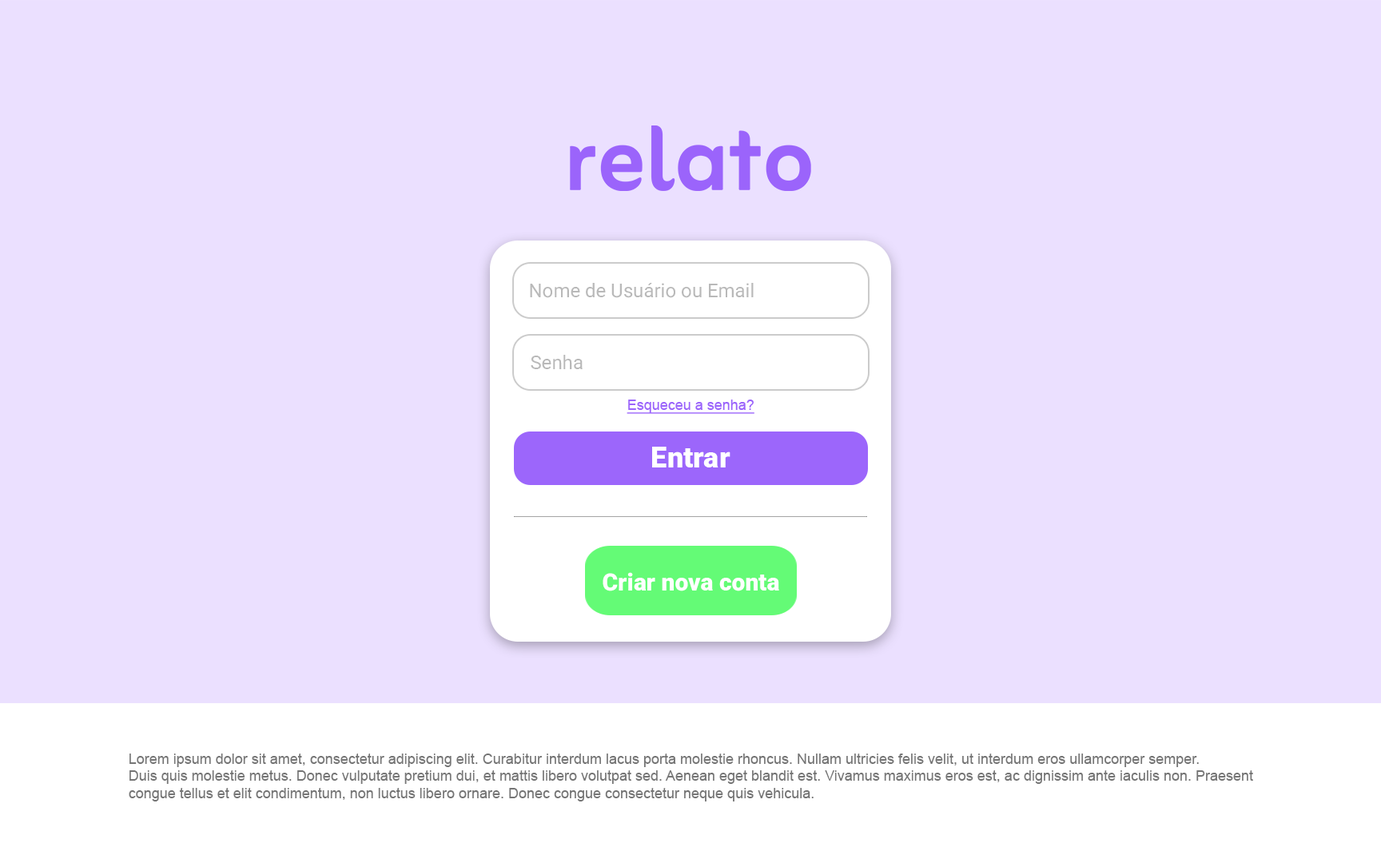
<style>
.page{position:relative;width:1381px;height:863px;background:#ebe0ff}
.page>*{position:absolute;margin:0}
.t1{font:19.2px "Roboto-Regular";color:#b9b9b9}
.t2{font:28.8px "Roboto-Black";color:#ffffff}
.t3{font:24px "Roboto-Black";color:#ffffff}
.t4{font:14.4px "ArialMT";color:#757575}
</style>
<div class="page">
<p class="t1" style="left:530px;top:283px;width:224px;height:15px">Nome de Usuário ou Email</p>
<p class="t1" style="left:531px;top:355px;width:52px;height:14px">Senha</p>
<p class="t2" style="left:652px;top:447px;width:79px;height:21px">Entrar</p>
<p class="t3" style="left:603px;top:572px;width:176px;height:20px">Criar nova conta</p>
<p class="t4" style="left:129px;top:754px;width:1124px;height:48px">Lorem ipsum dolor sit amet, consectetur adipiscing elit. Curabitur interdum lacus porta molestie rhoncus. Nullam ultricies felis velit, ut interdum eros ullamcorper semper. <br>Duis quis molestie metus. Donec vulputate pretium dui, et mattis libero volutpat sed. Aenean eget blandit est. Vivamus maximus eros est, ac dignissim ante iaculis non. Praesent <br>congue tellus et elit condimentum, non luctus libero ornare. Donec congue consectetur neque quis vehicula.</p>
</div>
